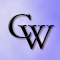
<style>
.page{position:relative;width:60px;height:60px}
.page>*{position:absolute;margin:0}
.t1{font:36px "AGaramondPro-Regular";color:#000000}
</style>
<div class="page">
<p class="t1" style="left:8px;top:14px;width:24px;height:24px">C</p>
<p class="t1" style="left:18px;top:25px;width:36px;height:24px">W</p>
</div>
